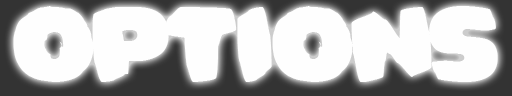
<style>
.page{position:relative;width:512px;height:96px;background:#fefefe}
.page>*{position:absolute;margin:0}
.t1{font:100px "Bomberman";color:#fefefe}
</style>
<div class="page">
<p class="t1" style="left:13px;top:6px;width:485px;height:76px">Options</p>
</div>
